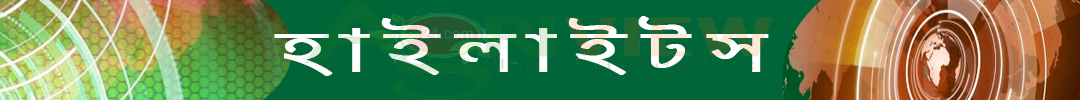
<style>
.page{position:relative;width:1080px;height:100px;background:#006637}
.page>*{position:absolute;margin:0}
.t1{font:50px "SiyamRupaliANSI";letter-spacing:0.2em;font-weight:bold;scale:1.61 1}
</style>
<div class="page">
<p class="t1" style="left:274px;top:16px;width:495px;height:60px">nvBjvBUm</p>
</div>
